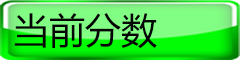
<style>
.page{position:relative;width:240px;height:60px;background:#82fe84}
.page>*{position:absolute;margin:0}
.t1{font:36px "MicrosoftYaHei";color:#040404}
</style>
<div class="page">
<p class="t1" style="left:14px;top:13px;width:143px;height:36px">当前分数</p>
</div>
